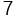
<style>
.page{position:relative;width:16px;height:16px;background:#ffffff}
.page>*{position:absolute;margin:0}
.t1{font:20px "DengXian";color:#000000}
</style>
<div class="page">
<p class="t1" style="left:3px;top:1px;width:10px;height:14px">7</p>
</div>
